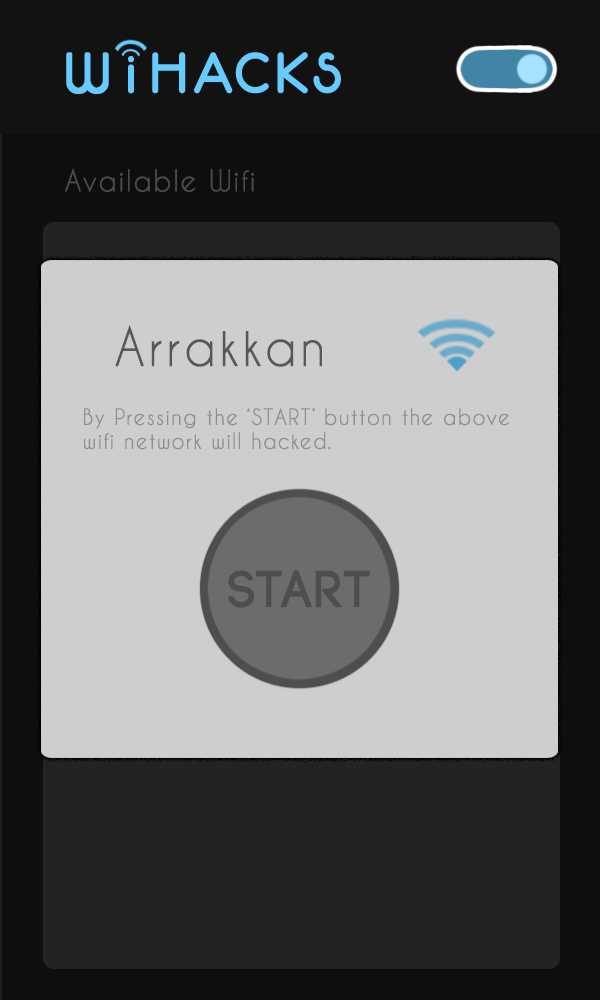
<style>
.page{position:relative;width:600px;height:1000px;background:#cecece}
.page>*{position:absolute;margin:0}
.t1{font:28.4px "CaviarDreams";letter-spacing:0.05em;color:#4b4b4b;font-weight:bold;scale:0.95 1}
.t2{font:50.4px "CaviarDreams";letter-spacing:0.05em;color:#585858;font-weight:bold;scale:0.95 1}
.t3{font:21px "CaviarDreams";letter-spacing:0.05em;color:#8f8f8f;font-weight:bold;scale:0.95 1}
.t4{font:51.5px "Code-Bold";letter-spacing:0.05em;color:#4e4e4e;font-weight:bold;scale:0.95 1}
</style>
<div class="page">
<p class="t1" style="left:65px;top:168px;width:189px;height:24px">Available Wifi</p>
<p class="t2" style="left:115px;top:325px;width:207px;height:42px">Arrakkan</p>
<p class="t3" style="left:84px;top:408px;width:425px;height:42px">By Pressing the ‘START’ button the above<br>wifi network will hacked.</p>
<p class="t4" style="left:228px;top:570px;width:142px;height:38px">START</p>
</div>
